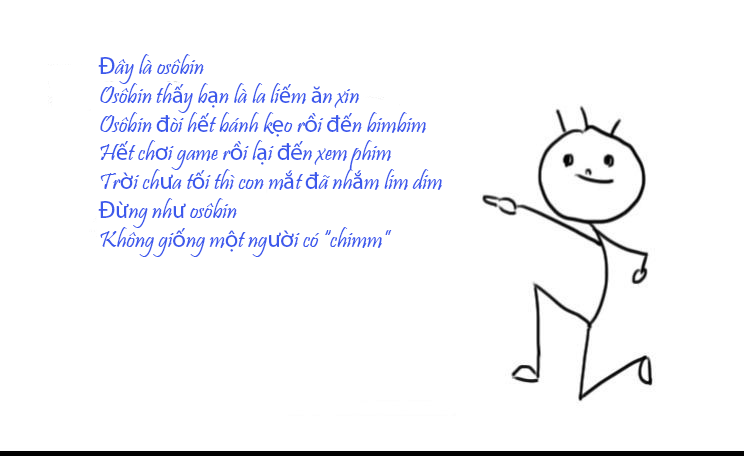
<style>
.page{position:relative;width:744px;height:456px;background:#ffffff}
.page>*{position:absolute;margin:0}
.t1{font:24px "Pristina-Regular";color:#3c59ec}
.t2{font:24px "MyriadPro-Regular";color:#3c59ec}
</style>
<div class="page">
<p class="t1" style="left:98px;top:54px;width:344px;height:203px"><span class="t2">Đ</span>ây là osôbin<br>Osôbin th<span class="t2">ấ</span>y b<span class="t2">ạ</span>n là la li<span class="t2">ế</span>m <span class="t2">ă</span>n xin<br>Osôbin <span class="t2">đ</span>òi h<span class="t2">ế</span>t bánh k<span class="t2">ẹ</span>o r<span class="t2">ồ</span>i <span class="t2">đế</span>n bimbim<br>H<span class="t2">ế</span>t ch<span class="t2">ơ</span>i game r<span class="t2">ồ</span>i l<span class="t2">ạ</span>i <span class="t2">đế</span>n xem phim<br>Tr<span class="t2">ờ</span>i ch<span class="t2">ư</span>a t<span class="t2">ố</span>i thì con m<span class="t2">ắ</span>t <span class="t2">đ</span>ã nh<span class="t2">ắ</span>m lim dim<br><span class="t2">Đừ</span>ng nh<span class="t2">ư</span> osôbin <br>Không gi<span class="t2">ố</span>ng m<span class="t2">ộ</span>t ng<span class="t2">ườ</span>i có “chimm”</p>
</div>
